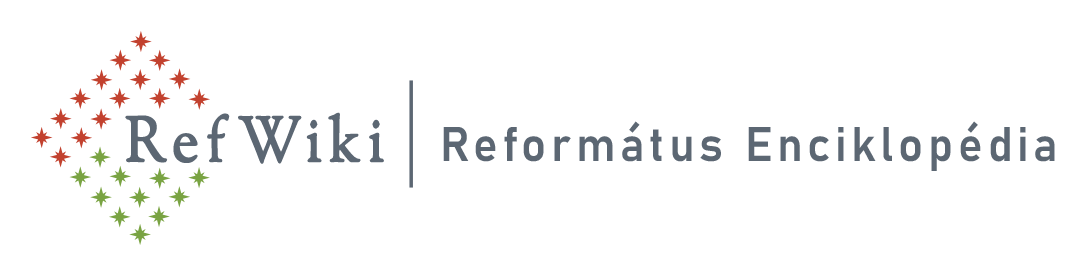
<style>
.page{position:relative;width:1086px;height:268px;background:#ffffff}
.page>*{position:absolute;margin:0}
.t1{font:62.4px "SortsMillGoudy-Regular";letter-spacing:0.1em;color:#5c6773;font-weight:bold;scale:0.92 1}
.t2{font:48.1px "Bahnschrift-SemiBold";letter-spacing:0.1em;color:#5c6773;scale:0.96 1}
</style>
<div class="page">
<p class="t1" style="left:125px;top:112px;width:259px;height:52px">RefWiki</p>
<p class="t2" style="left:443px;top:121px;width:612px;height:50px">Református Enciklopédia</p>
</div>
